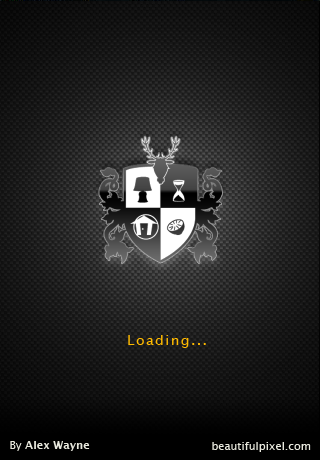
<style>
.page{position:relative;width:320px;height:460px}
.page>*{position:absolute;margin:0}
.t1{font:14px "LucidaGrande";letter-spacing:0.1em;color:#ffba00}
.t2{font:11px "LucidaGrande-Bold";color:#e9e9de}
.t3{font:11px "LucidaGrande";color:#e9e9de}
</style>
<div class="page">
<p class="t1" style="left:128px;top:335px;width:78px;height:13px">Loading...</p>
<p class="t2" style="left:10px;top:441px;width:80px;height:10px"><span class="t3">By </span>Alex Wayne</p>
<p class="t3" style="left:212px;top:442px;width:99px;height:10px">beautifulpixel.com</p>
</div>
